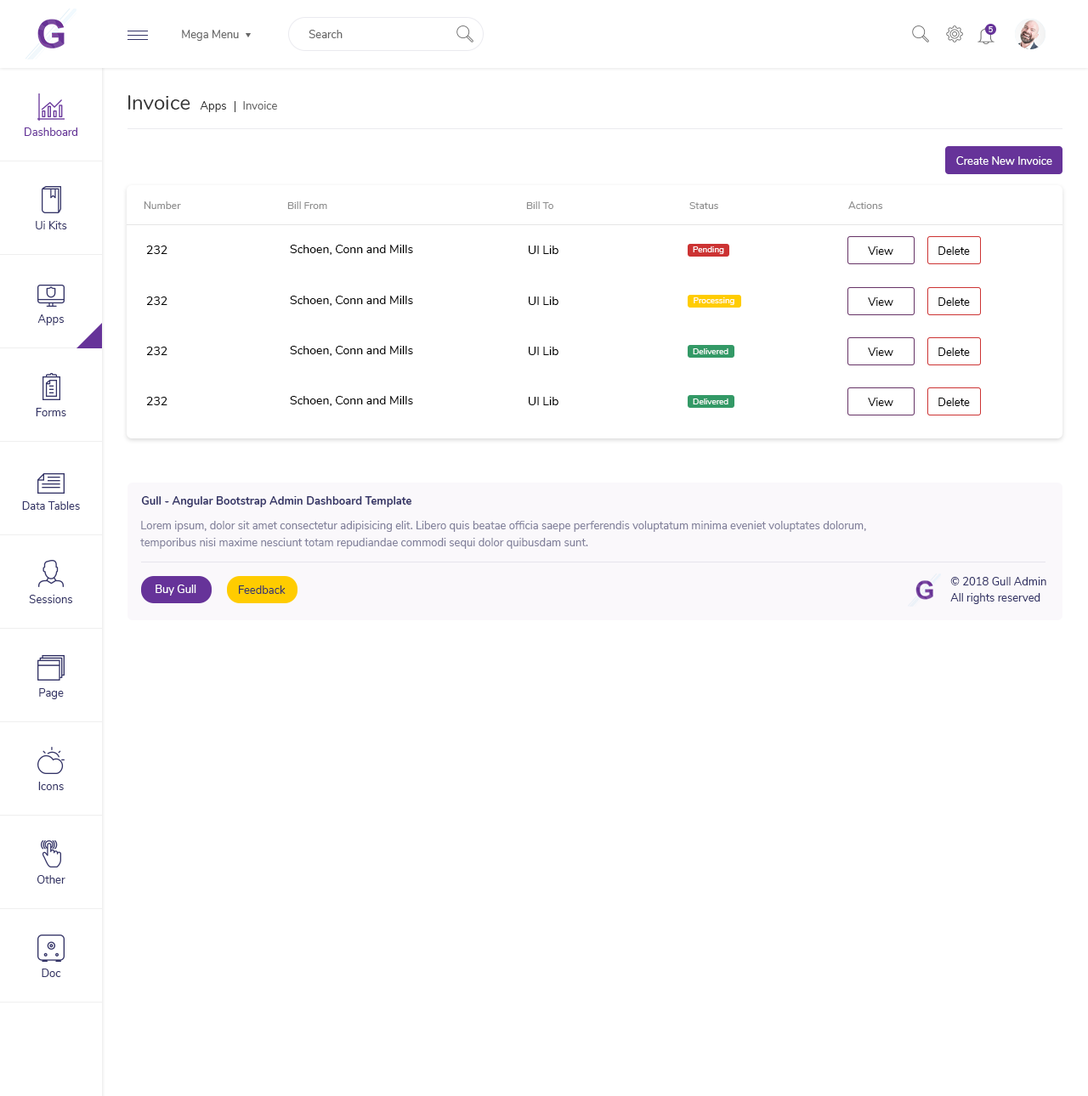
<style>
.page{position:relative;width:1088px;height:1096px;background:#ffffff}
.page>*{position:absolute;margin:0}
.t1{font:11px "Nunito-Regular";color:#666666}
.t2{font:7.6px "Nunito-SemiBold";color:#ffffff}
.t3{font:20.4px "Nunito-Regular";color:#333333}
.t4{font:11px "Nunito-Regular";color:#333333}
.t5{font:11px "Nunito-Regular";color:#663399}
.t6{font:11px "Nunito-Regular";color:#ffffff}
.t7{font:10.2px "Nunito-Regular";color:#8d8d8d}
.t8{font:11px "Nunito-Regular";color:#333366}
.t9{font:11.9px "Nunito-Regular";color:#000000}
.t10{font:8.5px "Nunito-Regular";color:#ffffff}
.t11{font:11px "Nunito-Regular";color:#000000}
.t12{font:11px "Nunito-Bold";color:#333366}
.t13{font:11px/17px "Nunito-Regular";color:#82819b}
</style>
<div class="page">
<p class="t1" style="left:182px;top:30px;width:57px;height:11px">Mega Menu</p>
<p class="t1" style="left:308px;top:30px;width:34px;height:8px">Search</p>
<p class="t2" style="left:988px;top:26px;width:5px;height:6px">5</p>
<p class="t3" style="left:128px;top:95px;width:62px;height:15px">Invoice</p>
<p class="t4" style="left:200px;top:101px;width:26px;height:11px">Apps</p>
<p class="t1" style="left:243px;top:101px;width:34px;height:9px">Invoice</p>
<p class="t5" style="left:25px;top:127px;width:52px;height:9px">Dashboard</p>
<p class="t6" style="left:956px;top:156px;width:96px;height:9px">Create New Invoice</p>
<p class="t7" style="left:144px;top:201px;width:37px;height:8px">Number</p>
<p class="t7" style="left:287px;top:201px;width:40px;height:8px">Bill From</p>
<p class="t7" style="left:526px;top:201px;width:27px;height:8px">Bill To</p>
<p class="t7" style="left:689px;top:202px;width:29px;height:7px">Status</p>
<p class="t7" style="left:848px;top:201px;width:35px;height:8px">Actions</p>
<p class="t8" style="left:36px;top:221px;width:31px;height:8px">Ui Kits</p>
<p class="t9" style="left:146px;top:246px;width:21px;height:8px">232</p>
<p class="t9" style="left:290px;top:245px;width:123px;height:10px">Schoen, Conn and Mills</p>
<p class="t9" style="left:529px;top:246px;width:29px;height:8px">UI Lib</p>
<p class="t10" style="left:693px;top:246px;width:31px;height:8px">Pending</p>
<p class="t11" style="left:868px;top:246px;width:25px;height:9px">View</p>
<p class="t11" style="left:938px;top:246px;width:32px;height:9px">Delete</p>
<p class="t9" style="left:146px;top:297px;width:21px;height:8px">232</p>
<p class="t9" style="left:290px;top:296px;width:123px;height:10px">Schoen, Conn and Mills</p>
<p class="t9" style="left:529px;top:297px;width:29px;height:8px">UI Lib</p>
<p class="t10" style="left:693px;top:297px;width:41px;height:8px">Processing</p>
<p class="t11" style="left:868px;top:297px;width:25px;height:9px">View</p>
<p class="t11" style="left:938px;top:297px;width:32px;height:9px">Delete</p>
<p class="t8" style="left:37px;top:314px;width:27px;height:11px">Apps</p>
<p class="t9" style="left:146px;top:347px;width:21px;height:8px">232</p>
<p class="t9" style="left:290px;top:346px;width:123px;height:10px">Schoen, Conn and Mills</p>
<p class="t9" style="left:529px;top:347px;width:29px;height:8px">UI Lib</p>
<p class="t10" style="left:693px;top:348px;width:35px;height:6px">Delivered</p>
<p class="t11" style="left:868px;top:348px;width:25px;height:8px">View</p>
<p class="t11" style="left:938px;top:348px;width:32px;height:8px">Delete</p>
<p class="t9" style="left:146px;top:397px;width:21px;height:8px">232</p>
<p class="t9" style="left:290px;top:396px;width:123px;height:10px">Schoen, Conn and Mills</p>
<p class="t9" style="left:529px;top:397px;width:29px;height:8px">UI Lib</p>
<p class="t10" style="left:693px;top:399px;width:35px;height:6px">Delivered</p>
<p class="t11" style="left:868px;top:398px;width:25px;height:8px">View</p>
<p class="t11" style="left:938px;top:398px;width:32px;height:8px">Delete</p>
<p class="t8" style="left:36px;top:408px;width:30px;height:8px">Forms</p>
<p class="t12" style="left:141px;top:496px;width:270px;height:11px">Gull - Angular Bootstrap Admin Dashboard Template</p>
<p class="t8" style="left:22px;top:501px;width:58px;height:9px">Data Tables</p>
<p class="t13" style="left:140px;top:521px;width:726px;height:28px">Lorem ipsum, dolor sit amet consectetur adipisicing elit. Libero quis beatae officia saepe perferendis voluptatum minima eveniet voluptates dolorum, <br>temporibus nisi maxime nesciunt totam repudiandae commodi sequi dolor quibusdam sunt.</p>
<p class="t8" style="left:950px;top:577px;width:96px;height:9px">© 2018 Gull Admin</p>
<p class="t6" style="left:156px;top:585px;width:40px;height:11px">Buy Gull</p>
<p class="t8" style="left:239px;top:586px;width:47px;height:8px">Feedback</p>
<p class="t8" style="left:950px;top:593px;width:90px;height:11px">All rights reserved</p>
<p class="t8" style="left:29px;top:595px;width:43px;height:8px">Sessions</p>
<p class="t8" style="left:39px;top:688px;width:25px;height:11px">Page</p>
<p class="t8" style="left:38px;top:782px;width:26px;height:8px">Icons</p>
<p class="t8" style="left:37px;top:875px;width:28px;height:9px">Other</p>
<p class="t8" style="left:42px;top:969px;width:19px;height:8px">Doc</p>
</div>
